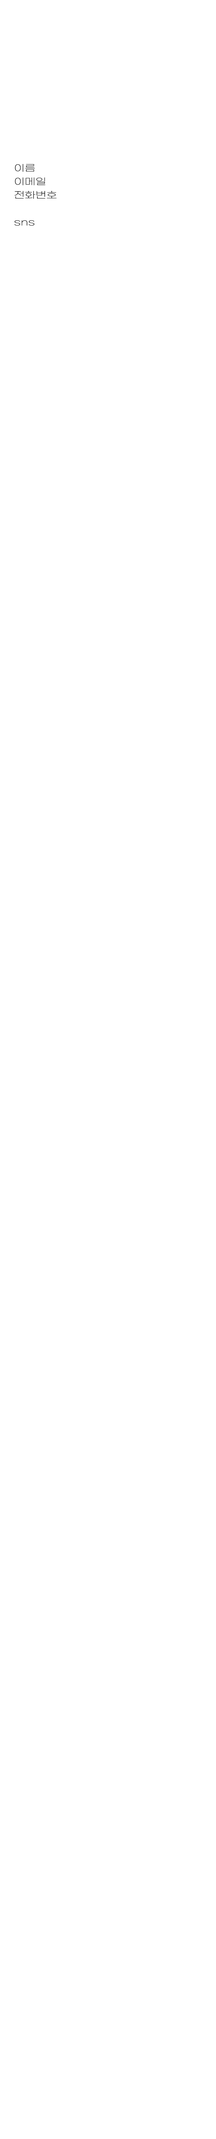
<style>
.page{position:relative;width:216px;height:2139px;background:#ffffff}
.page>*{position:absolute;margin:0}
.t1{font:9px "GmarketSansTTFLight";color:#000000;scale:1.25 1}
</style>
<div class="page">
<p class="t1" style="left:14px;top:164px;width:42px;height:62px;text-align:justify">이름<br>이메일 <br>전화번호<br><br>sns</p>
</div>
